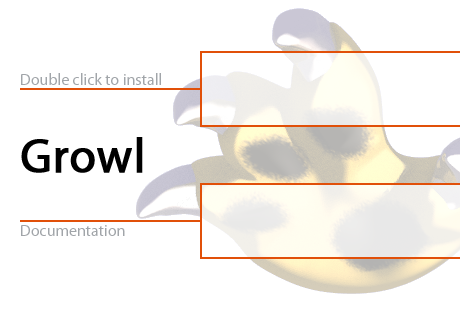
<style>
.page{position:relative;width:460px;height:310px;background:#ffffff}
.page>*{position:absolute;margin:0}
.t1{font:16px "Myriad-Roman";color:#a1a5a9}
.t2{font:48px "Myriad-Roman";color:#000000;font-weight:bold}
</style>
<div class="page">
<p class="t1" style="left:21px;top:73px;width:140px;height:12px">Double click to install</p>
<p class="t2" style="left:21px;top:137px;width:122px;height:36px">Growl</p>
<p class="t1" style="left:21px;top:225px;width:104px;height:11px">Documentation</p>
</div>
